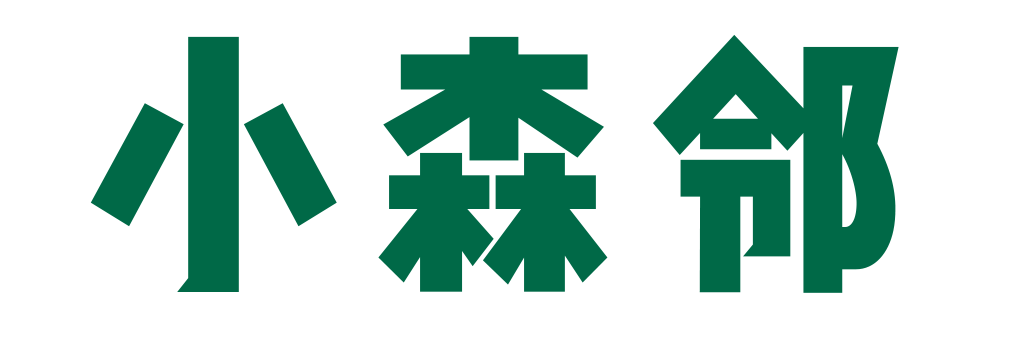
<style>
.page{position:relative;width:1024px;height:342px;background:#ffffff}
.page>*{position:absolute;margin:0}
.t1{font:287.2px "WenYue_XinQingNianTi_J-W8";letter-spacing:0.12em;color:#006947}
</style>
<div class="page">
<p class="t1" style="left:90px;top:34px;width:809px;height:259px">小森邻</p>
</div>
